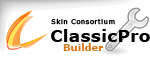
<style>
.page{position:relative;width:150px;height:57px;background:#ffffff}
.page>*{position:absolute;margin:0}
.t1{font:6.5px "Verdana";letter-spacing:0.1em;color:#010101}
.t2{font:17.4px "Verdana-Bold";color:#000000}
.t3{font:10px "Verdana-Bold";color:#d9781a}
</style>
<div class="page">
<p class="t1" style="left:51px;top:18px;width:64px;height:7px">Skin Consortium</p>
<p class="t2" style="left:51px;top:29px;width:99px;height:13px">ClassicPro</p>
<p class="t3" style="left:63px;top:43px;width:41px;height:8px">Builder</p>
</div>
